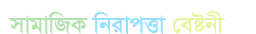
<style>
.page{position:relative;width:256px;height:34px;background:#ffffff}
.page>*{position:absolute;margin:0}
.t1{font:26.9px "SutonnyMJBold";scale:1.04 1}
</style>
<div class="page">
<p class="t1" style="left:8px;top:11px;width:218px;height:24px">mvgvwRK wbivcËv †eóbx</p>
</div>
